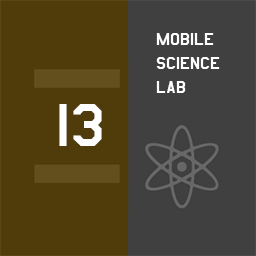
<style>
.page{position:relative;width:256px;height:256px;background:#404040}
.page>*{position:absolute;margin:0}
.t1{font:20px "AmarilloUSAF";color:#ffffff}
.t2{font:70px "AmarilloUSAF";color:#ffffff}
</style>
<div class="page">
<p class="t1" style="left:156px;top:33px;width:64px;height:60px">mobile<br>science<br>lab</p>
<p class="t2" style="left:59px;top:104px;width:43px;height:42px">13</p>
</div>
